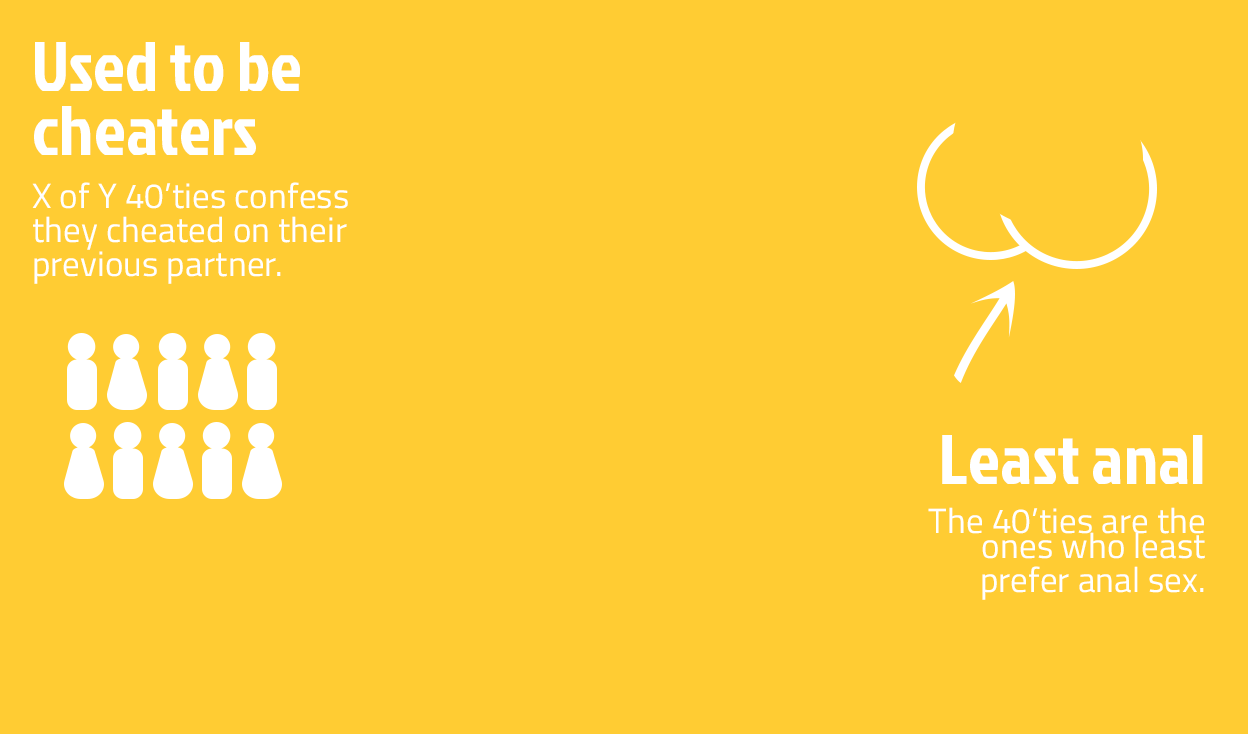
<style>
.page{position:relative;width:1248px;height:734px;background:#ffcc33}
.page>*{position:absolute;margin:0}
.t1{font:35px/34px "TitilliumWeb-Regular";letter-spacing:0.005em;color:#ffffff}
.t2{font:70px/64px "JockeyOne-Regular";letter-spacing:0.005em;color:#ffffff}
.t3{font:35px/53px "TitilliumWeb-Regular";letter-spacing:0.005em;color:#ffffff}
.t4{font:35px/25px "TitilliumWeb-Regular";letter-spacing:0.005em;color:#ffffff}
.t5{font:70px/100px "JockeyOne-Regular";letter-spacing:0.005em;color:#ffffff}
.t6{font:35px/49px "TitilliumWeb-Regular";letter-spacing:0.005em;color:#ffffff}
</style>
<div class="page">
<p class="t1" style="left:32px;top:42px;width:316px;height:242px"><span class="t2">Used to be <br>cheaters<br></span><span class="t3">X </span>of Y 40’ties confess <br>they cheated on their <br>previous partner.</p>
<p class="t4" style="left:928px;top:435px;width:277px;height:165px;text-align:right"><span class="t5">Least anal<br></span><span class="t6">The </span>40’ties are the ones who least <span class="t1">prefer anal sex.</span></p>
</div>
